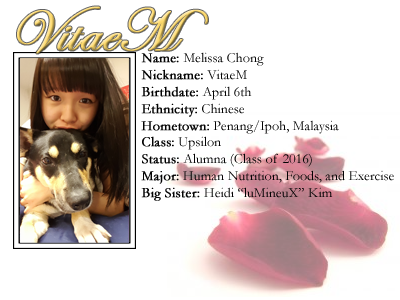
<style>
.page{position:relative;width:400px;height:300px;background:#ffffff}
.page>*{position:absolute;margin:0}
.t1{font:60px "EdwardianScriptITC";font-weight:bold}
.t2{font:14px "Garamond";color:#000000}
.t3{font:14px "Garamond";color:#000000;font-weight:bold}
</style>
<div class="page">
<p class="t1" style="left:17px;top:6px;width:191px;height:48px">VitaeM</p>
<p class="t2" style="left:141px;top:52px;width:253px;height:149px"><span class="t3">Name: </span>Melissa Chong<br><span class="t3">Nickname:</span> VitaeM<br><span class="t3">Birthdate:</span> April 6th<br><span class="t3">Ethnicity:</span> Chinese<br><span class="t3">Hometown:</span> Penang/Ipoh, Malaysia<br><span class="t3">Class:</span> Upsilon<br><span class="t3">Status:</span> Alumna (Class of 2016)<br><span class="t3">Major:</span> Human Nutrition, Foods, and Exercise<br><span class="t3">Big Sister: </span>Heidi “luMineuX” Kim</p>
</div>
